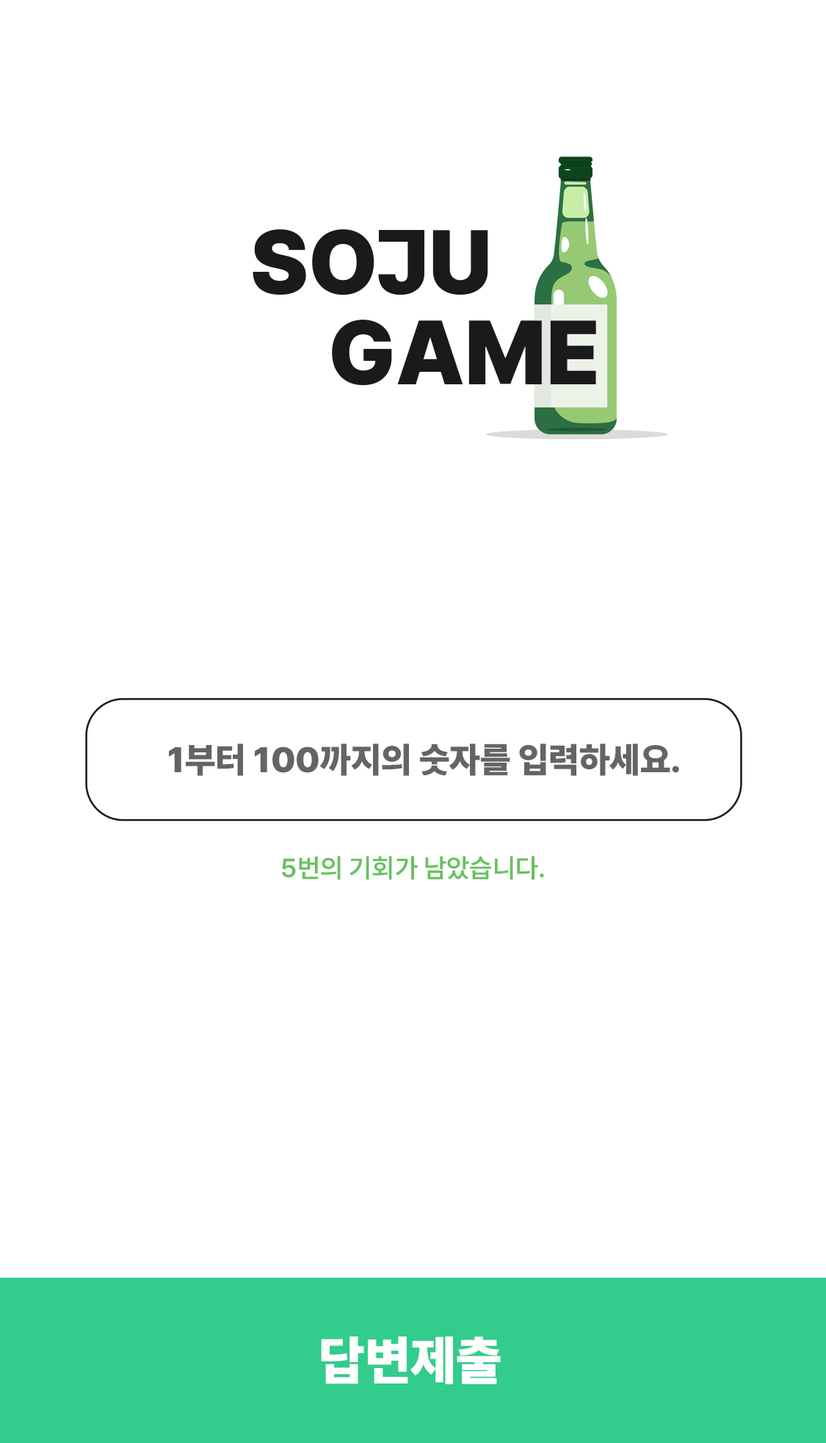
<style>
.page{position:relative;width:826px;height:1443px;background:#ffffff}
.page>*{position:absolute;margin:0}
.t1{font:35.3px "Pretendard-Black";color:#646464}
.t2{font:26.4px "Pretendard-SemiBold";color:#67c25e}
.t3{font:52.9px "Pretendard-Black";color:#ffffff}
</style>
<div class="page">
<p class="t1" style="left:169px;top:743px;width:511px;height:33px">1부터 100까지의 숫자를 입력하세요.</p>
<p class="t2" style="left:282px;top:856px;width:262px;height:24px">5번의 기회가 남았습니다.</p>
<p class="t3" style="left:321px;top:1336px;width:180px;height:48px">답변제출</p>
</div>
